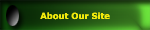
<style>
.page{position:relative;width:150px;height:30px}
.page>*{position:absolute;margin:0}
.t1{font:8.6px "Verdana-Bold";color:#f1e90c}
</style>
<div class="page">
<p class="t1" style="left:40px;top:12px;width:70px;height:8px">About Our Site</p>
</div>
